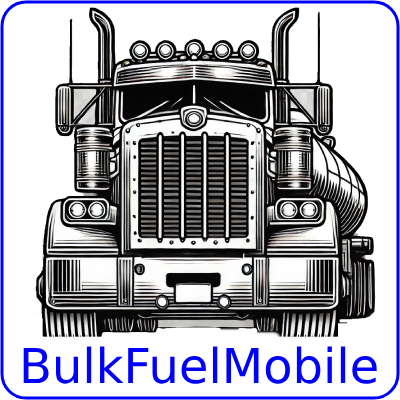
<style>
.page{position:relative;width:400px;height:400px;background:#ffffff}
.page>*{position:absolute;margin:0}
.t1{font:48px "DejaVuSans";color:#0000ff}
</style>
<div class="page">
<p class="t1" style="left:23px;top:346px;width:354px;height:38px">BulkFuelMobile</p>
</div>
